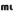
<style>
.page{position:relative;width:16px;height:16px;background:#ffffff}
.page>*{position:absolute;margin:0}
.t1{font:8.3px "Bauhaus93";letter-spacing:0.025em;color:#000000;scale:1.25 1}
</style>
<div class="page">
<p class="t1" style="left:1px;top:4px;width:12px;height:7px">ML</p>
</div>
